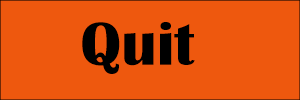
<style>
.page{position:relative;width:300px;height:100px;background:#ee580e}
.page>*{position:absolute;margin:0}
.t1{font:62.7px "BritannicBold";color:#000000}
</style>
<div class="page">
<p class="t1" style="left:82px;top:22px;width:113px;height:52px">Quit</p>
</div>
